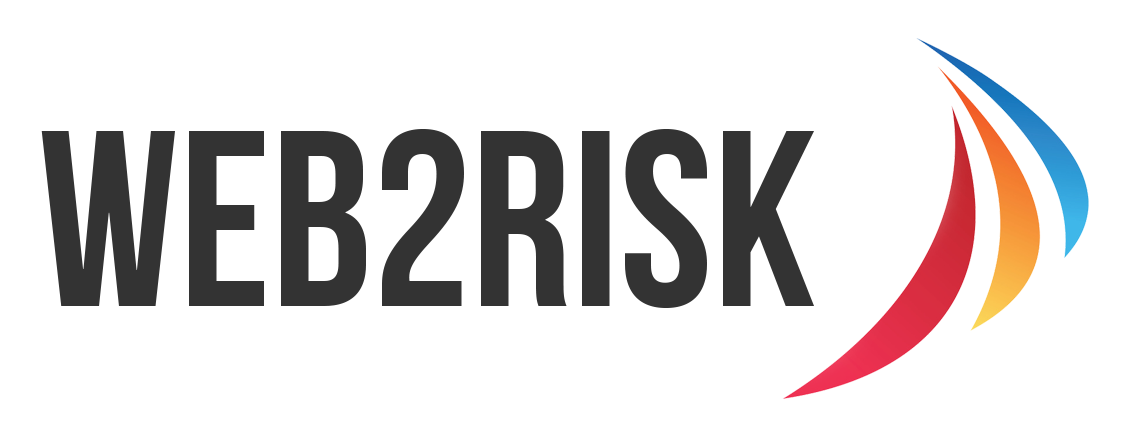
<style>
.page{position:relative;width:1124px;height:429px;background:#ffffff}
.page>*{position:absolute;margin:0}
.t1{font:250px "BebasNeue";color:#333333}
</style>
<div class="page">
<p class="t1" style="left:41px;top:129px;width:773px;height:179px">Web2Risk</p>
</div>
